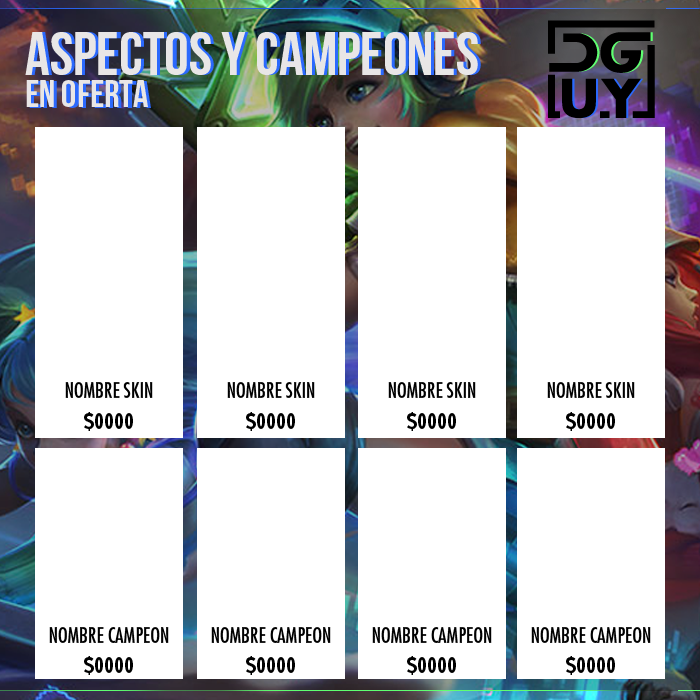
<style>
.page{position:relative;width:700px;height:700px;background:#ffffff}
.page>*{position:absolute;margin:0}
.t1{font:20.4px "FuturaStd-Condensed";color:#000000;text-transform:uppercase}
.t2{font:20.4px "FuturaStd-CondensedBold";color:#000000;text-transform:uppercase}
</style>
<div class="page">
<p class="t1" style="left:65px;top:382px;width:88px;height:16px">NOMBRE SKIN</p>
<p class="t1" style="left:227px;top:382px;width:88px;height:16px">NOMBRE SKIN</p>
<p class="t1" style="left:388px;top:382px;width:88px;height:16px">NOMBRE SKIN</p>
<p class="t1" style="left:547px;top:382px;width:88px;height:16px">NOMBRE SKIN</p>
<p class="t2" style="left:84px;top:412px;width:49px;height:19px">$0000</p>
<p class="t2" style="left:246px;top:412px;width:49px;height:19px">$0000</p>
<p class="t2" style="left:407px;top:412px;width:49px;height:19px">$0000</p>
<p class="t2" style="left:566px;top:412px;width:49px;height:19px">$0000</p>
<p class="t1" style="left:49px;top:627px;width:120px;height:16px">NOMBRE CAMPEON</p>
<p class="t1" style="left:211px;top:627px;width:120px;height:16px">NOMBRE CAMPEON</p>
<p class="t1" style="left:372px;top:627px;width:120px;height:16px">NOMBRE CAMPEON</p>
<p class="t1" style="left:531px;top:627px;width:120px;height:16px">NOMBRE CAMPEON</p>
<p class="t2" style="left:84px;top:656px;width:49px;height:19px">$0000</p>
<p class="t2" style="left:246px;top:656px;width:49px;height:19px">$0000</p>
<p class="t2" style="left:407px;top:656px;width:49px;height:19px">$0000</p>
<p class="t2" style="left:566px;top:656px;width:49px;height:19px">$0000</p>
</div>
